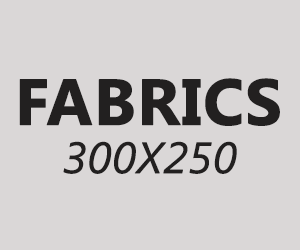
<style>
.page{position:relative;width:300px;height:250px;background:#dad7d7}
.page>*{position:absolute;margin:0}
.t1{font:64.5px "SegoeUI-Bold";color:#222020;text-transform:uppercase;font-weight:bold}
.t2{font:43.6px "SegoeUI-Italic";color:#222020;text-transform:uppercase;font-weight:bold}
</style>
<div class="page">
<p class="t1" style="left:19px;top:78px;width:261px;height:48px">FABRICS</p>
<p class="t2" style="left:63px;top:141px;width:174px;height:33px">300x250</p>
</div>
